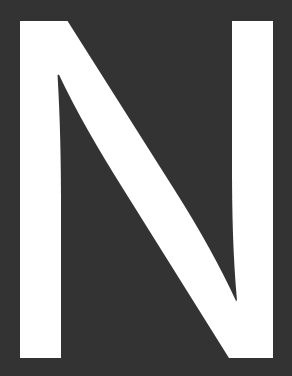
<style>
.page{position:relative;width:292px;height:376px;background:#333333}
.page>*{position:absolute;margin:0}
.t1{font:500px "MyriadPro-Regular";color:#ffffff}
</style>
<div class="page">
<p class="t1" style="left:20px;top:21px;width:253px;height:337px">N</p>
</div>
